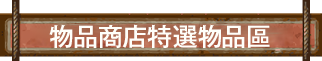
<style>
.page{position:relative;width:322px;height:61px;background:#ffffff}
.page>*{position:absolute;margin:0}
.t1{font:25px "GothicMB101Pr6N-Medium";color:#fffffa}
</style>
<div class="page">
<p class="t1" style="left:49px;top:24px;width:221px;height:24px">物品商店特選物品區</p>
</div>
